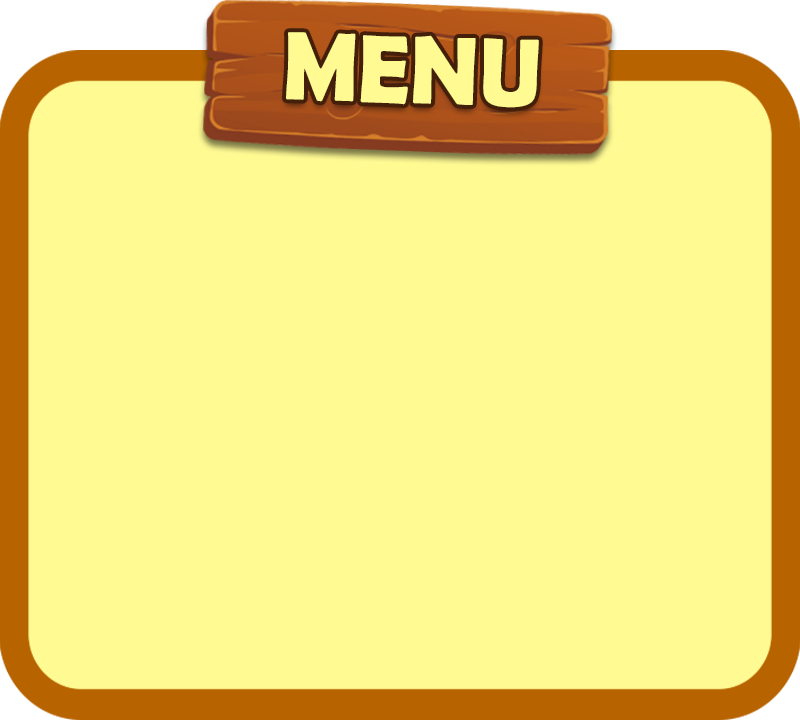
<style>
.page{position:relative;width:800px;height:720px;background:#fffa92}
.page>*{position:absolute;margin:0}
.t1{font:97.9px "BerlinSansFBDemi-Bold";color:#fffa92;scale:0.94 1}
</style>
<div class="page">
<p class="t1" style="left:286px;top:32px;width:253px;height:76px;rotate:2deg">MENU</p>
</div>
